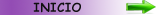
<style>
.page{position:relative;width:156px;height:15px}
.page>*{position:absolute;margin:0}
.t1{font:12px "ComicSansMS-Bold";letter-spacing:0.025em;color:#101010}
</style>
<div class="page">
<p class="t1" style="left:33px;top:2px;width:48px;height:11px">INICIO</p>
</div>
